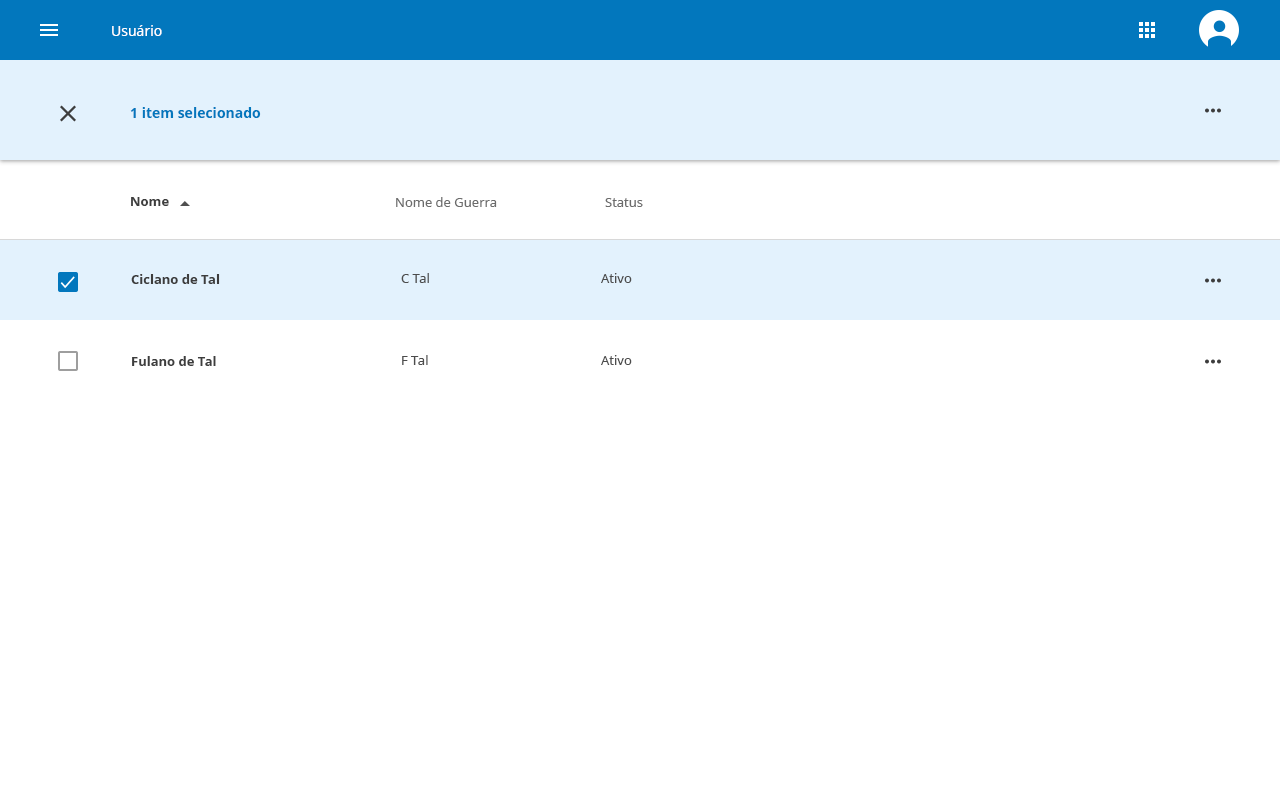
<style>
.page{position:relative;width:1280px;height:800px;background:#ffffff}
.page>*{position:absolute;margin:0}
.t1{font:14px "NotoSans";color:#ffffff}
.t2{font:14px "NotoSans-Bold";color:#0277bd}
.t3{font:13px "NotoSans-Bold";color:#3d3d3d}
.t4{font:13px "NotoSans";color:#6c6c6c}
.t5{font:13px "NotoSans";color:#4c4c4c}
</style>
<div class="page">
<p class="t1" style="left:112px;top:25px;width:50px;height:11px">Usuário</p>
<p class="t2" style="left:130px;top:107px;width:131px;height:11px">1 item selecionado</p>
<p class="t3" style="left:131px;top:197px;width:38px;height:9px">Nome</p>
<p class="t4" style="left:396px;top:197px;width:101px;height:10px">Nome de Guerra</p>
<p class="t4" style="left:605px;top:198px;width:38px;height:9px">Status</p>
<p class="t3" style="left:131px;top:274px;width:89px;height:10px">Ciclano de Tal</p>
<p class="t5" style="left:401px;top:273px;width:28px;height:10px">C Tal</p>
<p class="t5" style="left:601px;top:273px;width:31px;height:10px">Ativo</p>
<p class="t3" style="left:132px;top:356px;width:84px;height:10px">Fulano de Tal</p>
<p class="t5" style="left:402px;top:355px;width:26px;height:10px">F Tal</p>
<p class="t5" style="left:601px;top:355px;width:31px;height:10px">Ativo</p>
</div>
